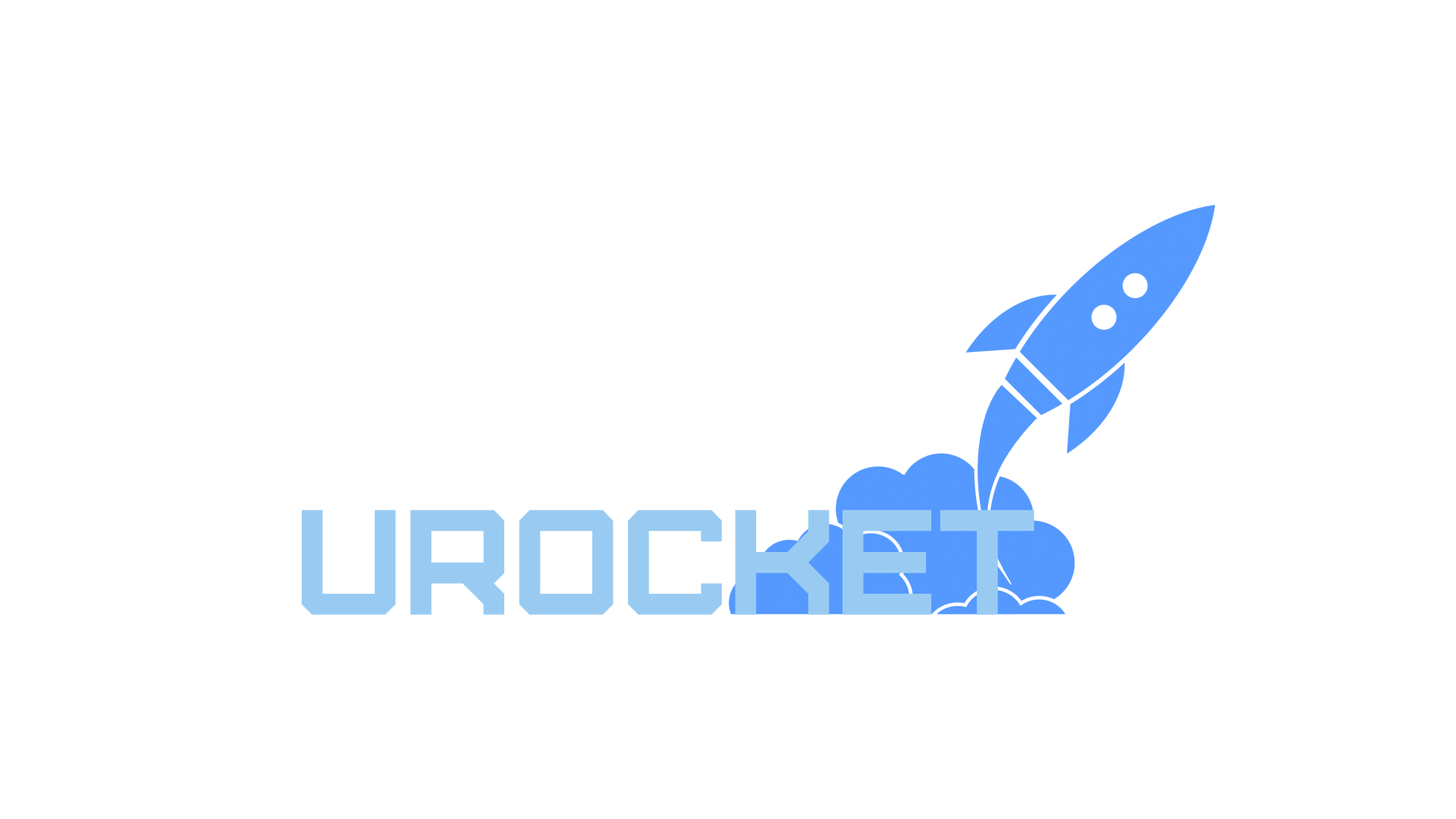
<style>
.page{position:relative;width:1456px;height:819px;background:#ffffff}
.page>*{position:absolute;margin:0}
.t1{font:149.4px "Furore";color:#99cbf2}
</style>
<div class="page">
<p class="t1" style="left:301px;top:510px;width:733px;height:105px">URocket</p>
</div>
